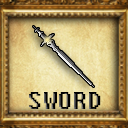
<style>
.page{position:relative;width:128px;height:128px}
.page>*{position:absolute;margin:0}
.t1{font:24px "Fixedsys"}
</style>
<div class="page">
<p class="t1" style="left:29px;top:92px;width:72px;height:17px">SWORD</p>
</div>
